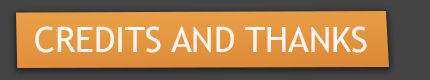
<style>
.page{position:relative;width:430px;height:80px}
.page>*{position:absolute;margin:0}
.t1{font:35px "TrebuchetMS";color:#fff3ed}
</style>
<div class="page">
<p class="t1" style="left:35px;top:26px;width:332px;height:27px">CREDITS AND THANKS</p>
</div>
